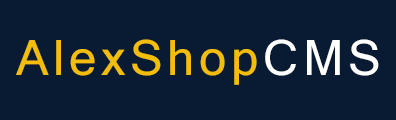
<style>
.page{position:relative;width:396px;height:120px;background:#091a33}
.page>*{position:absolute;margin:0}
.t1{font:47.1px "Mangal";letter-spacing:0.1em;color:#f2bd0b}
.t2{font:47.1px "Mangal";letter-spacing:0.1em;color:#ffffff}
</style>
<div class="page">
<p class="t1" style="left:16px;top:39px;width:363px;height:46px">AlexShop<span class="t2">CMS</span></p>
</div>
